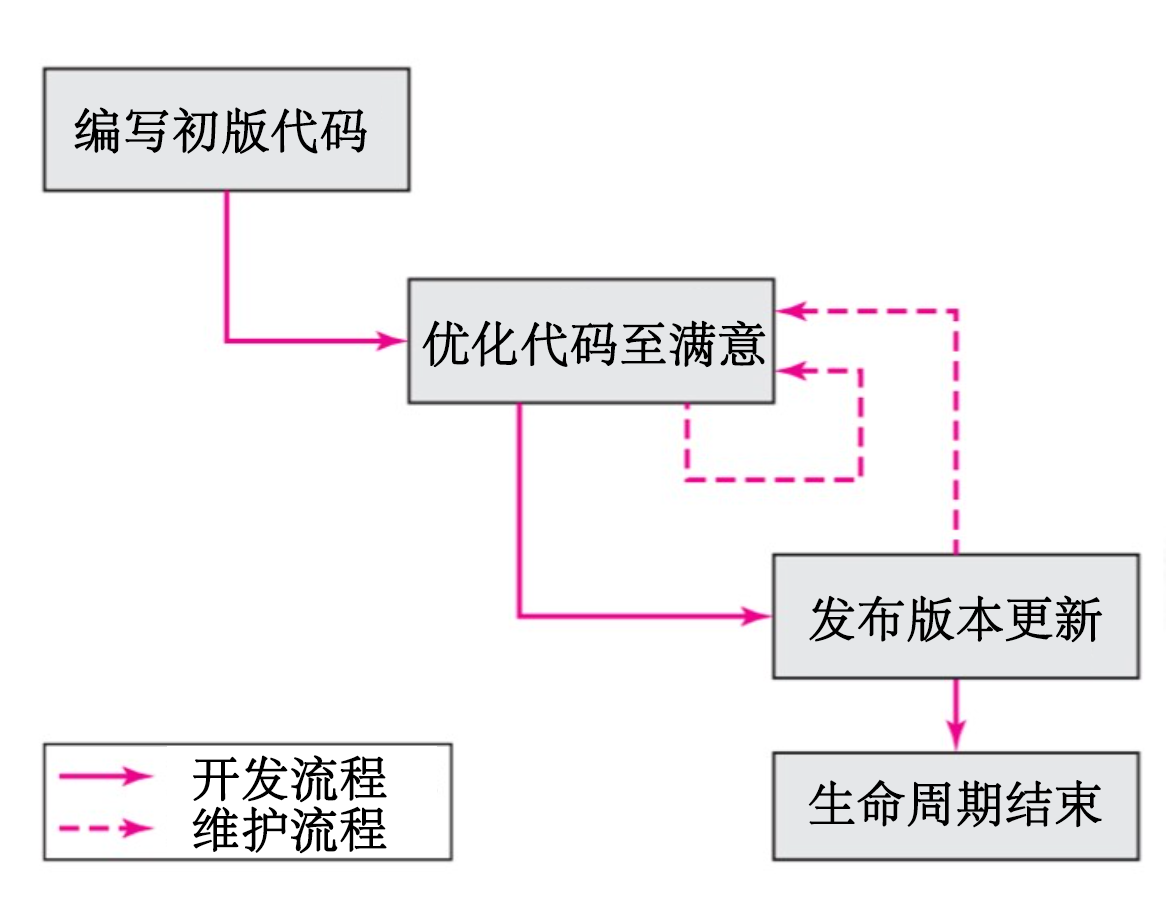
<style>
.page{position:relative;width:1166px;height:914px;background:#ffffff}
.page>*{position:absolute;margin:0}
.t1{font:48px "STSong";color:#000000;font-weight:bold}
</style>
<div class="page">
<p class="t1" style="left:74px;top:107px;width:293px;height:47px">编写初版代码</p>
<p class="t1" style="left:422px;top:320px;width:344px;height:48px">优化代码至满意</p>
<p class="t1" style="left:809px;top:595px;width:294px;height:48px">发布版本更新</p>
<p class="t1" style="left:193px;top:755px;width:194px;height:48px">开发流程</p>
<p class="t1" style="left:808px;top:779px;width:294px;height:49px">生命周期结束</p>
<p class="t1" style="left:192px;top:806px;width:195px;height:48px">维护流程</p>
</div>
